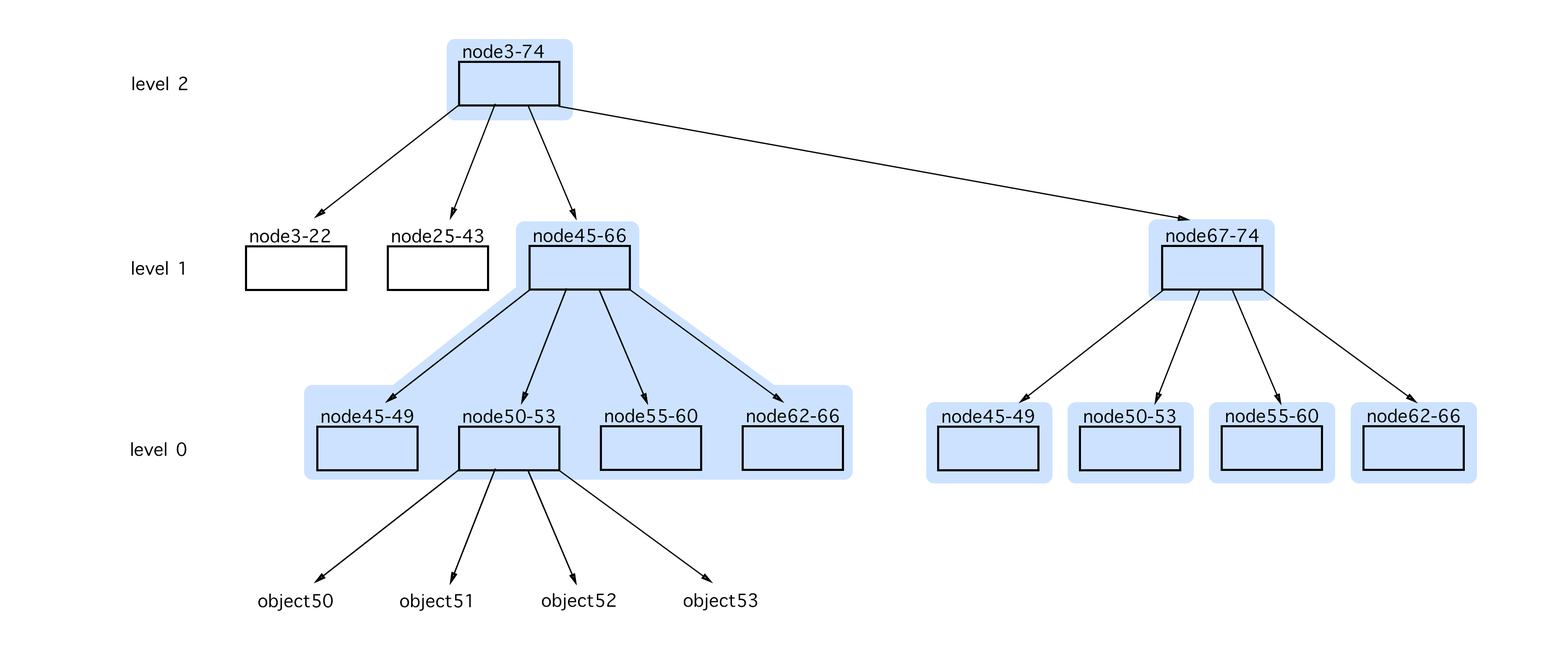
<style>
.page{position:relative;width:1568px;height:668px;background:#ffffff}
.page>*{position:absolute;margin:0}
.t1{font:24.5px "AppleSymbols";color:#000000}
</style>
<div class="page">
<p class="t1" style="left:464px;top:44px;width:80px;height:14px">node3-74</p>
<p class="t1" style="left:133px;top:76px;width:55px;height:15px">level 2</p>
<p class="t1" style="left:250px;top:229px;width:80px;height:14px">node3-22</p>
<p class="t1" style="left:392px;top:229px;width:92px;height:14px">node25-43</p>
<p class="t1" style="left:534px;top:228px;width:92px;height:14px">node45-66</p>
<p class="t1" style="left:1167px;top:228px;width:92px;height:14px">node67-74</p>
<p class="t1" style="left:132px;top:261px;width:52px;height:14px">level 1</p>
<p class="t1" style="left:322px;top:409px;width:91px;height:14px">node45-49</p>
<p class="t1" style="left:464px;top:409px;width:91px;height:14px">node50-53</p>
<p class="t1" style="left:605px;top:409px;width:93px;height:14px">node55-60</p>
<p class="t1" style="left:747px;top:409px;width:92px;height:14px">node62-66</p>
<p class="t1" style="left:943px;top:409px;width:91px;height:14px">node45-49</p>
<p class="t1" style="left:1084px;top:409px;width:92px;height:14px">node50-53</p>
<p class="t1" style="left:1226px;top:409px;width:92px;height:14px">node55-60</p>
<p class="t1" style="left:1368px;top:409px;width:92px;height:14px">node62-66</p>
<p class="t1" style="left:131px;top:442px;width:56px;height:14px">level 0</p>
<p class="t1" style="left:258px;top:594px;width:75px;height:17px">object50</p>
<p class="t1" style="left:400px;top:594px;width:71px;height:17px">object51</p>
<p class="t1" style="left:542px;top:593px;width:74px;height:18px">object52</p>
<p class="t1" style="left:684px;top:593px;width:74px;height:18px">object53</p>
</div>
